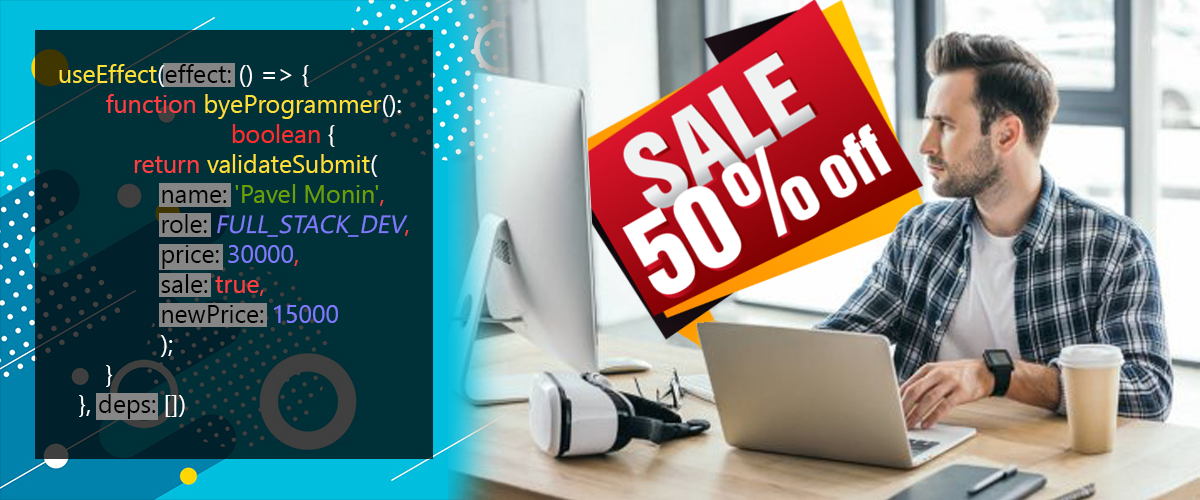
<style>
.page{position:relative;width:1200px;height:500px}
.page>*{position:absolute;margin:0}
.t1{font:25px "SegoeUIHistoric";color:#ffffff}
.t2{font:25px "SegoeUIHistoric";color:#ffe037}
.t3{font:25px "SegoeUIHistoric";color:#000000}
.t4{font:25px "SegoeUIHistoric";color:#fe3e41}
.t5{font:25px "SegoeUIHistoric";color:#ff2d2d}
.t6{font:25px "SegoeUIHistoric";color:#6aa003}
.t7{font:25px "SegoeUIHistoric";color:#7d7aff;font-style:italic}
.t8{font:25px "SegoeUIHistoric";color:#7d7aff}
</style>
<div class="page">
<p class="t1" style="left:59px;top:64px;width:350px;height:355px"><span class="t2">useEffect</span>(<span class="t3">effect: </span>() =&gt; {<br>        <span class="t4">function </span><span class="t2">byeProgrammer</span>():         <span class="t5">boolean </span>{<br>            <span class="t4">return </span><span class="t2">validateSubmit</span>(<br>                <span class="t3">name: </span><span class="t6">'Pavel Monin'</span><span class="t4">,<br>                </span><span class="t3">role: </span><span class="t7">FULL_STACK_DEV</span><span class="t4">,<br>                </span><span class="t3">price: </span><span class="t8">30000</span><span class="t4">,<br>                </span><span class="t3">sale: </span><span class="t4">true,<br>                </span><span class="t3">newPrice: </span><span class="t8">15000<br></span>                );<br>        }<br>    }, <span class="t3">deps: </span>[])</p>
</div>
